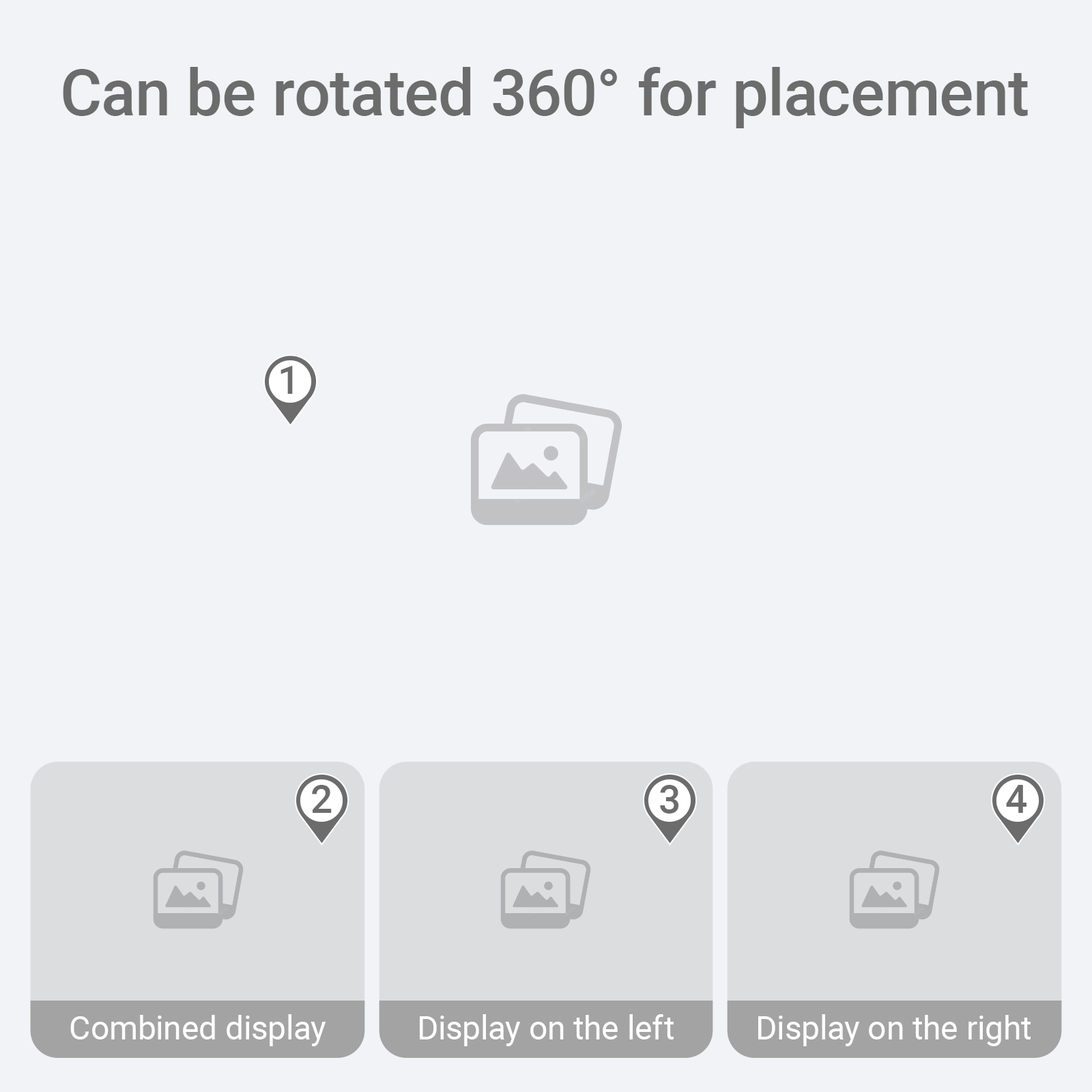
<style>
.page{position:relative;width:1092px;height:1092px;background:#f2f3f6}
.page>*{position:absolute;margin:0}
.t1{font:64.1px "Roboto-Medium";color:#6c6c6c}
.t2{font:38.9px "Roboto-Medium";color:#6c6c6c}
.t3{font:32.8px "Roboto-Regular";color:#ffffff}
</style>
<div class="page">
<p class="t1" style="left:63px;top:67px;width:965px;height:61px">Can be rotated 360° for placement</p>
<p class="t2" style="left:281px;top:366px;width:12px;height:28px">1</p>
<p class="t2" style="left:312px;top:785px;width:20px;height:28px">2</p>
<p class="t2" style="left:660px;top:785px;width:19px;height:29px">3</p>
<p class="t2" style="left:1006px;top:785px;width:20px;height:28px">4</p>
<p class="t3" style="left:70px;top:1014px;width:256px;height:32px">Combined display</p>
<p class="t3" style="left:420px;top:1014px;width:254px;height:32px">Display on the left</p>
<p class="t3" style="left:758px;top:1014px;width:273px;height:32px">Display on the right</p>
</div>
